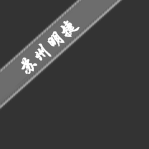
<style>
.page{position:relative;width:149px;height:149px;background:#333333}
.page>*{position:absolute;margin:0}
.t1{font:18px "STXingkai";color:#ffffff;font-weight:bold}
</style>
<div class="page">
<p class="t1" style="left:21px;top:20px;width:59px;height:54px;rotate:-43deg">苏州明捷</p>
</div>
